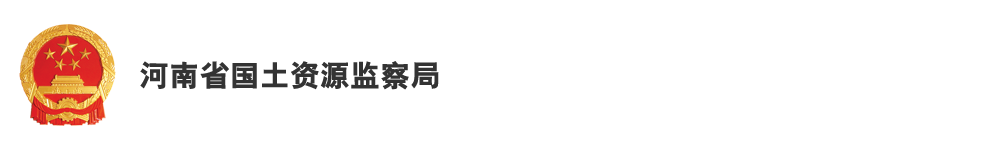
<style>
.page{position:relative;width:1000px;height:150px;background:#ffffff}
.page>*{position:absolute;margin:0}
.t1{font:29.2px "HeitiCSEG";letter-spacing:0.005em;color:#333333;font-weight:bold}
</style>
<div class="page">
<p class="t1" style="left:140px;top:61px;width:299px;height:29px">河南省国土资源监察局</p>
</div>
